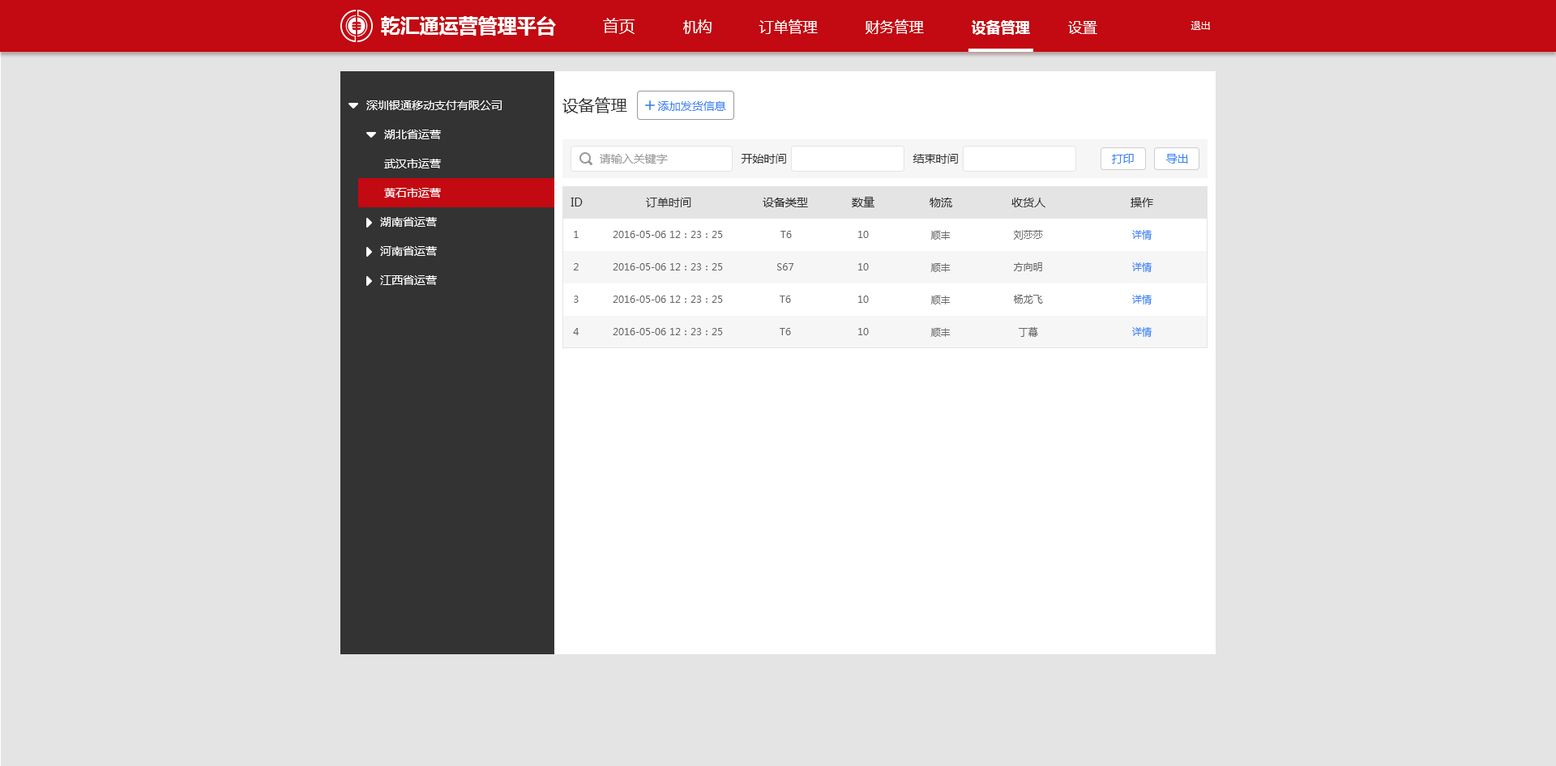
<style>
.page{position:relative;width:1556px;height:766px;background:#e4e4e4}
.page>*{position:absolute;margin:0}
.t1{font:19.4px "MicrosoftYaHei-Bold";color:#ffffff}
.t2{font:16.2px "MicrosoftYaHei";color:#ffffff}
.t3{font:14.6px "MicrosoftYaHei";color:#ffffff}
.t4{font:14.6px "MicrosoftYaHei-Bold";color:#ffffff}
.t5{font:9.7px "MicrosoftYaHei";color:#ffffff}
.t6{font:11.3px "MicrosoftYaHei";color:#ffffff}
.t7{font:16.2px "MicrosoftYaHei";color:#333333}
.t8{font:11.3px "MicrosoftYaHei";color:#3880f6}
.t9{font:11.3px "MicrosoftYaHei";color:#999999}
.t10{font:11.3px "MicrosoftYaHei";color:#333333}
.t11{font:9.7px "MicrosoftYaHei";color:#666666}
.t12{font:9.7px "MicrosoftYaHei";color:#3880f6}
</style>
<div class="page">
<p class="t1" style="left:381px;top:16px;width:175px;height:20px">乾汇通运营管理平台</p>
<p class="t2" style="left:603px;top:18px;width:31px;height:16px">首页</p>
<p class="t3" style="left:683px;top:19px;width:28px;height:15px">机构</p>
<p class="t3" style="left:758px;top:19px;width:60px;height:15px">订单管理</p>
<p class="t3" style="left:865px;top:19px;width:59px;height:15px">财务管理</p>
<p class="t4" style="left:971px;top:19px;width:59px;height:16px">设备管理</p>
<p class="t3" style="left:1068px;top:21px;width:29px;height:13px">设置</p>
<p class="t5" style="left:1190px;top:21px;width:20px;height:9px">退出</p>
<p class="t6" style="left:366px;top:100px;width:136px;height:10px">深圳银通移动支付有限公司</p>
<p class="t7" style="left:562px;top:97px;width:65px;height:16px">设备管理</p>
<p class="t8" style="left:658px;top:101px;width:68px;height:10px">添加发货信息</p>
<p class="t6" style="left:384px;top:130px;width:57px;height:9px">湖北省运营</p>
<p class="t6" style="left:384px;top:159px;width:57px;height:10px">武汉市运营</p>
<p class="t9" style="left:600px;top:154px;width:68px;height:10px">请输入关键字</p>
<p class="t10" style="left:741px;top:154px;width:45px;height:10px">开始时间</p>
<p class="t10" style="left:912px;top:154px;width:46px;height:10px">结束时间</p>
<p class="t8" style="left:1112px;top:154px;width:22px;height:10px">打印</p>
<p class="t8" style="left:1165px;top:154px;width:23px;height:10px">导出</p>
<p class="t6" style="left:384px;top:188px;width:57px;height:10px">黄石市运营</p>
<p class="t10" style="left:570px;top:198px;width:13px;height:9px">ID</p>
<p class="t10" style="left:646px;top:198px;width:45px;height:9px">订单时间</p>
<p class="t10" style="left:762px;top:198px;width:46px;height:9px">设备类型</p>
<p class="t10" style="left:852px;top:197px;width:22px;height:10px">数量</p>
<p class="t10" style="left:929px;top:198px;width:23px;height:9px">物流</p>
<p class="t10" style="left:1011px;top:198px;width:34px;height:9px">收货人</p>
<p class="t10" style="left:1130px;top:198px;width:23px;height:9px">操作</p>
<p class="t6" style="left:380px;top:217px;width:57px;height:10px">湖南省运营</p>
<p class="t11" style="left:574px;top:231px;width:5px;height:7px">1</p>
<p class="t11" style="left:613px;top:231px;width:110px;height:7px">2016-05-06 12：23：25</p>
<p class="t11" style="left:780px;top:231px;width:12px;height:7px">T6</p>
<p class="t11" style="left:858px;top:231px;width:11px;height:7px">10</p>
<p class="t11" style="left:930px;top:231px;width:20px;height:9px">顺丰</p>
<p class="t11" style="left:1013px;top:230px;width:30px;height:10px">刘莎莎</p>
<p class="t12" style="left:1132px;top:230px;width:19px;height:10px">详情</p>
<p class="t6" style="left:380px;top:246px;width:57px;height:10px">河南省运营</p>
<p class="t11" style="left:574px;top:263px;width:5px;height:8px">2</p>
<p class="t11" style="left:613px;top:263px;width:110px;height:8px">2016-05-06 12：23：25</p>
<p class="t11" style="left:777px;top:263px;width:17px;height:8px">S67</p>
<p class="t11" style="left:858px;top:263px;width:11px;height:8px">10</p>
<p class="t11" style="left:930px;top:263px;width:20px;height:9px">顺丰</p>
<p class="t11" style="left:1014px;top:263px;width:28px;height:8px">方向明</p>
<p class="t12" style="left:1132px;top:263px;width:19px;height:9px">详情</p>
<p class="t6" style="left:380px;top:275px;width:57px;height:10px">江西省运营</p>
<p class="t11" style="left:574px;top:296px;width:5px;height:7px">3</p>
<p class="t11" style="left:613px;top:296px;width:110px;height:7px">2016-05-06 12：23：25</p>
<p class="t11" style="left:779px;top:296px;width:12px;height:7px">T6</p>
<p class="t11" style="left:858px;top:296px;width:11px;height:7px">10</p>
<p class="t11" style="left:930px;top:296px;width:20px;height:9px">顺丰</p>
<p class="t11" style="left:1014px;top:295px;width:29px;height:9px">杨龙飞</p>
<p class="t12" style="left:1132px;top:295px;width:19px;height:10px">详情</p>
<p class="t11" style="left:573px;top:328px;width:6px;height:7px">4</p>
<p class="t11" style="left:613px;top:328px;width:110px;height:7px">2016-05-06 12：23：25</p>
<p class="t11" style="left:779px;top:328px;width:12px;height:7px">T6</p>
<p class="t11" style="left:858px;top:328px;width:11px;height:7px">10</p>
<p class="t11" style="left:930px;top:328px;width:20px;height:9px">顺丰</p>
<p class="t11" style="left:1018px;top:327px;width:20px;height:10px">丁幕</p>
<p class="t12" style="left:1132px;top:327px;width:19px;height:10px">详情</p>
</div>
